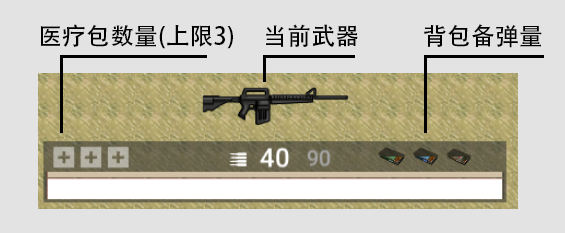
<style>
.page{position:relative;width:565px;height:233px;background:#e3e3e3}
.page>*{position:absolute;margin:0}
.t1{font:24px "AdobeHeitiStd-Regular";color:#000000}
</style>
<div class="page">
<p class="t1" style="left:40px;top:24px;width:193px;height:25px">医疗包数量(上限3)</p>
<p class="t1" style="left:266px;top:24px;width:92px;height:23px">当前武器</p>
<p class="t1" style="left:424px;top:24px;width:118px;height:24px">背包备弹量</p>
</div>
